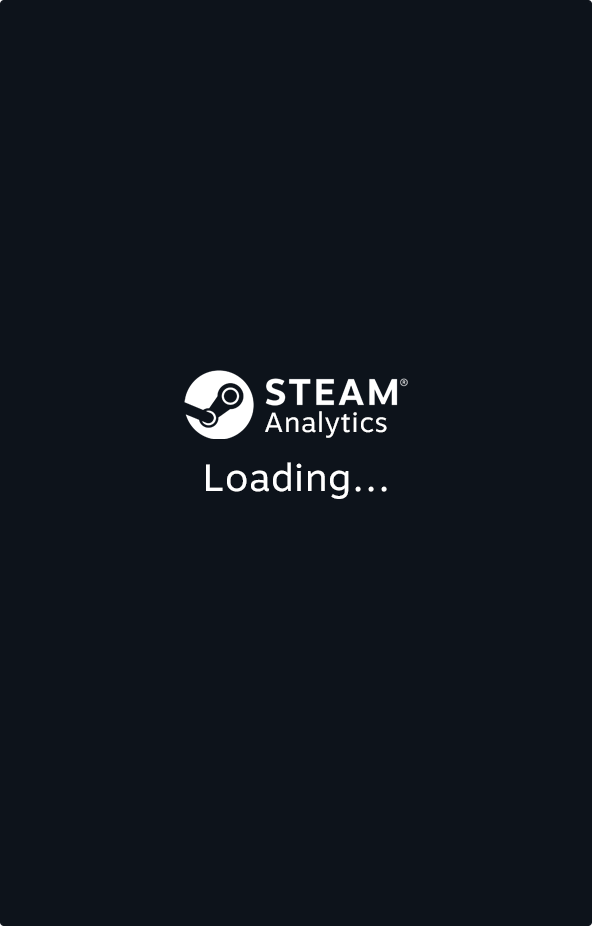
<style>
.page{position:relative;width:592px;height:926px;background:#0d131b}
.page>*{position:absolute;margin:0}
.t1{font:27.5px "MotivaSans-Regular";letter-spacing:0.02em;color:#ffffff}
.t2{font:38px "MotivaSans-Regular";letter-spacing:0.02em;color:#ffffff}
</style>
<div class="page">
<p class="t1" style="left:265px;top:411px;width:122px;height:27px">Analytics</p>
<p class="t2" style="left:206px;top:462px;width:181px;height:37px">Loading...</p>
</div>
